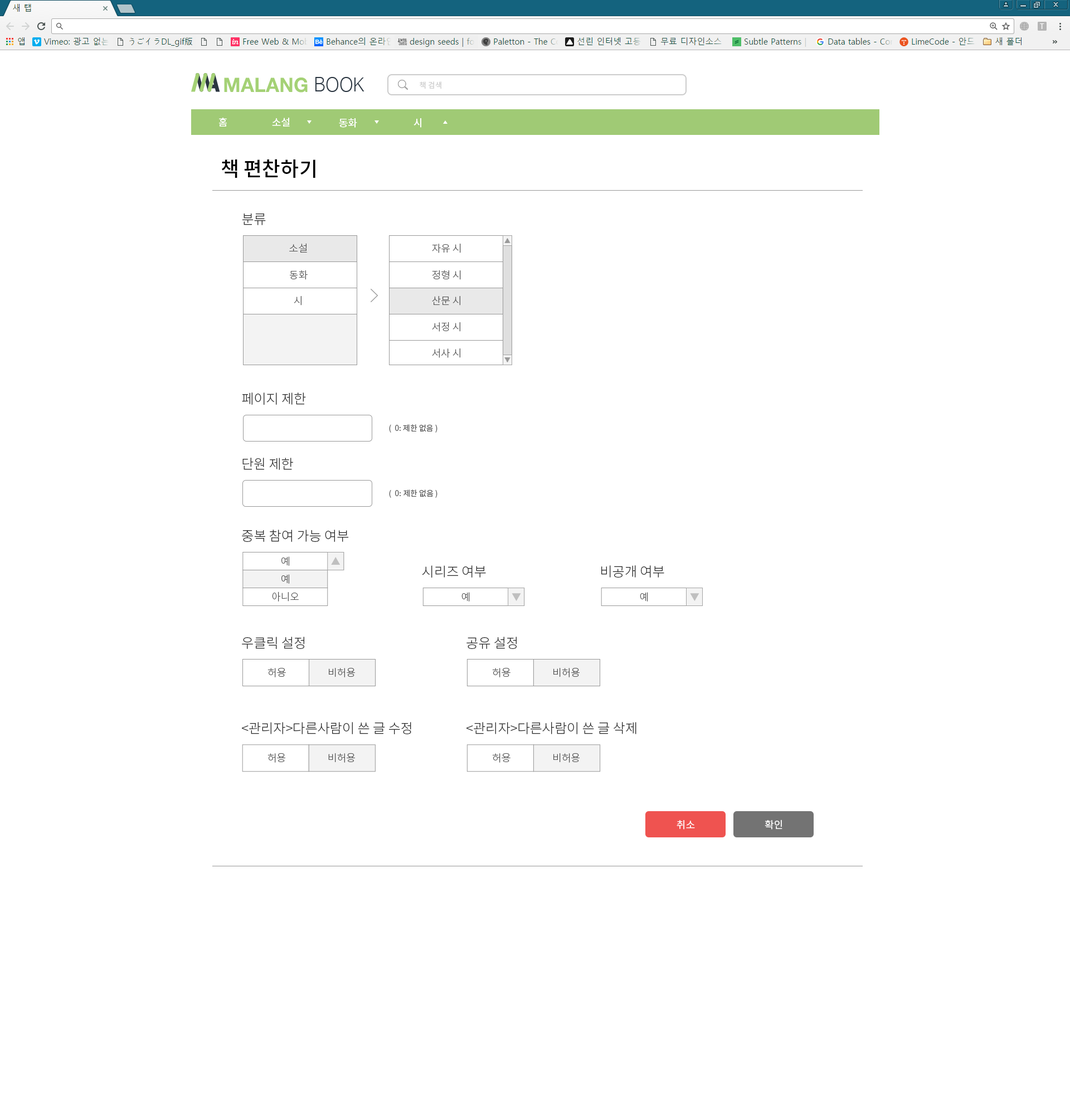
<style>
.page{position:relative;width:1070px;height:1115px;background:#ffffff}
.page>*{position:absolute;margin:0}
.t1{font:7.8px "NotoSansCJKkr-Medium";color:#d2d2d2}
.t2{font:10px "NotoSansCJKkr-Medium";color:#ffffff}
.t3{font:7.8px "NanumBarunGothicBold";color:#f3f3f3}
.t4{font:20.1px "NotoSansCJKkr-Medium";color:#000000}
.t5{font:13.4px "NotoSansCJKkr-Light";color:#2e2e2e}
.t6{font:10px "NotoSansCJKkr-Light";color:#535353}
.t7{font:13.4px "NotoSansCJKkr-Light";color:#2d2d2d}
.t8{font:7.8px "NotoSansCJKkr-Regular";color:#585858}
.t9{font:13.3px "NotoSansCJKkr-Light";color:#2d2d2d}
.t10{font:10px "NotoSansCJKkr-Regular";color:#ffffff}
</style>
<div class="page">
<p class="t1" style="left:420px;top:81px;width:21px;height:8px">책 검색</p>
<p class="t2" style="left:219px;top:118px;width:8px;height:8px">홈</p>
<p class="t2" style="left:272px;top:118px;width:18px;height:8px">소설</p>
<p class="t2" style="left:339px;top:118px;width:18px;height:10px">동화</p>
<p class="t2" style="left:413px;top:118px;width:8px;height:10px"><span class="t3"> </span>시</p>
<p class="t4" style="left:221px;top:159px;width:94px;height:19px">책 편찬하기</p>
<p class="t5" style="left:242px;top:213px;width:24px;height:12px">분류</p>
<p class="t6" style="left:289px;top:243px;width:18px;height:9px">소설</p>
<p class="t6" style="left:432px;top:244px;width:29px;height:9px">자유 시</p>
<p class="t6" style="left:432px;top:270px;width:29px;height:10px">정형 시</p>
<p class="t6" style="left:290px;top:270px;width:18px;height:10px">동화</p>
<p class="t6" style="left:294px;top:296px;width:7px;height:9px">시</p>
<p class="t6" style="left:432px;top:296px;width:28px;height:9px">산문 시</p>
<p class="t6" style="left:432px;top:322px;width:28px;height:10px">서정 시</p>
<p class="t6" style="left:432px;top:348px;width:28px;height:10px">서사 시</p>
<p class="t7" style="left:242px;top:392px;width:64px;height:13px">페이지 제한</p>
<p class="t8" style="left:389px;top:424px;width:48px;height:8px">(  0: 제한 없음 )</p>
<p class="t9" style="left:242px;top:458px;width:51px;height:12px">단원 제한</p>
<p class="t8" style="left:389px;top:489px;width:48px;height:9px">(  0: 제한 없음 )</p>
<p class="t9" style="left:242px;top:529px;width:107px;height:13px">중복 참여 가능 여부</p>
<p class="t6" style="left:281px;top:556px;width:8px;height:10px">예</p>
<p class="t9" style="left:422px;top:565px;width:64px;height:12px">시리즈 여부</p>
<p class="t9" style="left:601px;top:565px;width:63px;height:12px">비공개 여부</p>
<p class="t6" style="left:281px;top:574px;width:8px;height:9px">예</p>
<p class="t6" style="left:272px;top:591px;width:27px;height:10px">아니오</p>
<p class="t6" style="left:461px;top:592px;width:9px;height:9px">예</p>
<p class="t6" style="left:640px;top:592px;width:8px;height:9px">예</p>
<p class="t7" style="left:242px;top:636px;width:62px;height:13px">우클릭 설정</p>
<p class="t7" style="left:466px;top:636px;width:51px;height:13px">공유 설정</p>
<p class="t6" style="left:267px;top:668px;width:19px;height:9px">허용</p>
<p class="t6" style="left:329px;top:668px;width:26px;height:9px">비허용</p>
<p class="t6" style="left:492px;top:668px;width:18px;height:9px">허용</p>
<p class="t6" style="left:553px;top:668px;width:27px;height:9px">비허용</p>
<p class="t7" style="left:242px;top:722px;width:169px;height:12px">&lt;관리자&gt;다른사람이 쓴 글 수정</p>
<p class="t7" style="left:466px;top:722px;width:170px;height:12px">&lt;관리자&gt;다른사람이 쓴 글 삭제</p>
<p class="t6" style="left:267px;top:753px;width:18px;height:9px">허용</p>
<p class="t6" style="left:328px;top:753px;width:27px;height:9px">비허용</p>
<p class="t6" style="left:492px;top:753px;width:18px;height:9px">허용</p>
<p class="t6" style="left:553px;top:753px;width:27px;height:9px">비허용</p>
<p class="t10" style="left:677px;top:820px;width:18px;height:9px">취소</p>
<p class="t10" style="left:765px;top:819px;width:17px;height:10px">확인</p>
</div>
